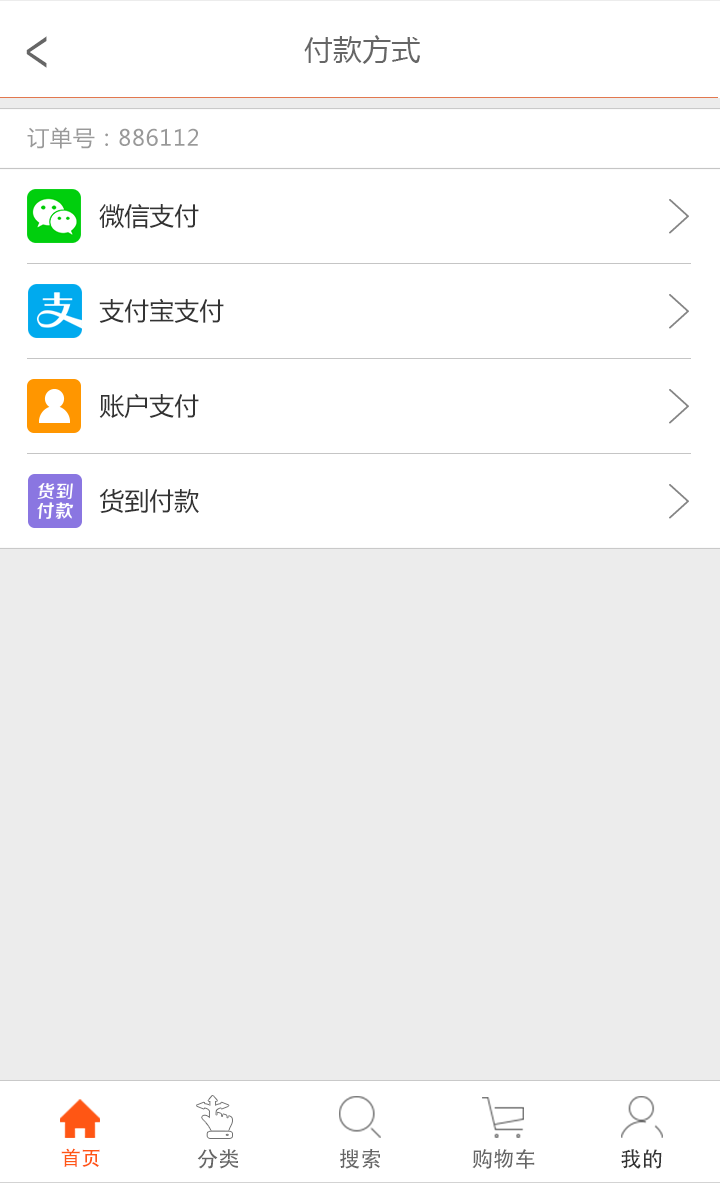
<style>
.page{position:relative;width:720px;height:1183px;background:#ffffff}
.page>*{position:absolute;margin:0}
.t1{font:51.9px "AdobeHeitiStd-Regular";color:#666666;scale:0.72 1}
.t2{font:29.2px "MicrosoftYaHei";color:#666666}
.t3{font:22px "MicrosoftYaHei";letter-spacing:0.035em;color:#999999}
.t4{font:25px/95px "MicrosoftYaHei";color:#333333}
.t5{font:20px "AdobeHeitiStd-Regular";color:#ff5614}
.t6{font:21.4px "AdobeHeitiStd-Regular";color:#666666}
.t7{font:21.4px "AdobeHeitiStd-Regular";color:#333333}
</style>
<div class="page">
<p class="t1" style="left:26px;top:36px;width:21px;height:32px;rotate:180deg">&gt;</p>
<p class="t2" style="left:304px;top:35px;width:116px;height:29px">付款方式</p>
<p class="t3" style="left:27px;top:127px;width:171px;height:22px">订单号：886112</p>
<p class="t4" style="left:99px;top:204px;width:125px;height:310px;text-align:justify">微信支付<br>支付宝支付<br>账户支付<br>货到付款</p>
<p class="t5" style="left:61px;top:1148px;width:39px;height:19px">首页</p>
<p class="t6" style="left:197px;top:1149px;width:42px;height:20px">分类</p>
<p class="t6" style="left:340px;top:1148px;width:40px;height:21px">搜索</p>
<p class="t6" style="left:472px;top:1149px;width:63px;height:20px">购物车</p>
<p class="t7" style="left:621px;top:1149px;width:41px;height:20px">我的</p>
</div>
